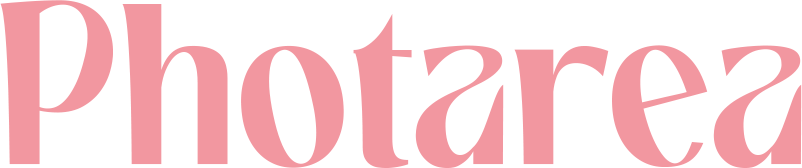
<style>
.page{position:relative;width:802px;height:168px;background:#ffffff}
.page>*{position:absolute;margin:0}
.t1{font:229px "Marga-DEMO";color:#f297a0}
</style>
<div class="page">
<p class="t1" style="left:0px;top:0px;width:802px;height:168px">Photarea</p>
</div>
